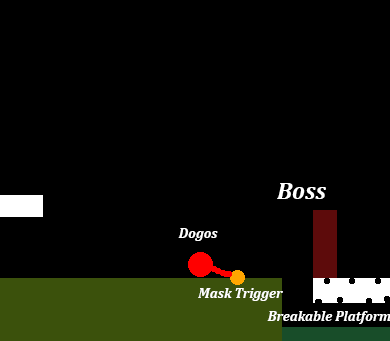
<style>
.page{position:relative;width:390px;height:341px;background:#000000}
.page>*{position:absolute;margin:0}
.t1{font:14px "Cambria-BoldItalic";color:#ffffff}
</style>
<div class="page">
<p class="t1" style="left:178px;top:228px;width:40px;height:13px">Dogos</p>
<p class="t1" style="left:198px;top:288px;width:85px;height:13px">Mask Trigger</p>
<p class="t1" style="left:267px;top:311px;width:124px;height:13px">Breakable Platform</p>
</div>
